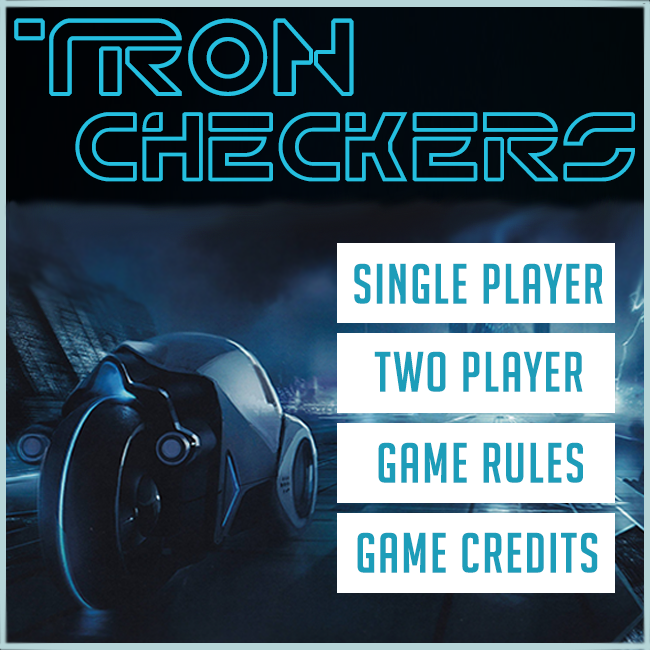
<style>
.page{position:relative;width:650px;height:650px}
.page>*{position:absolute;margin:0}
.t1{font:110.2px "TRN";letter-spacing:0.04em;color:#25bfe0}
.t2{font:98.4px "TRN";letter-spacing:0.04em;color:#25bfe0}
.t3{font:55.1px "BigNoodleTitling";letter-spacing:0.04em;color:#1d9db9}
</style>
<div class="page">
<p class="t1" style="left:14px;top:18px;width:340px;height:78px">TRON</p>
<p class="t2" style="left:75px;top:112px;width:560px;height:70px">cHECKERS</p>
<p class="t3" style="left:354px;top:263px;width:249px;height:41px">Single Player</p>
<p class="t3" style="left:374px;top:351px;width:209px;height:41px">Two Player</p>
<p class="t3" style="left:378px;top:442px;width:205px;height:41px">Game Rules</p>
<p class="t3" style="left:357px;top:532px;width:241px;height:41px">Game credits</p>
</div>
